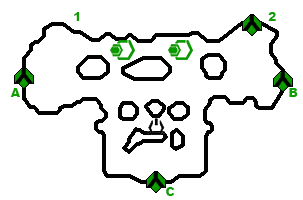
<style>
.page{position:relative;width:303px;height:200px;background:#ffffff}
.page>*{position:absolute;margin:0}
.t1{font:12px "Arial-Black";color:#0d9e01}
</style>
<div class="page">
<p class="t1" style="left:74px;top:12px;width:6px;height:9px">1</p>
<p class="t1" style="left:268px;top:12px;width:8px;height:9px">2</p>
<p class="t1" style="left:10px;top:88px;width:10px;height:9px">A</p>
<p class="t1" style="left:289px;top:88px;width:9px;height:9px">B</p>
<p class="t1" style="left:166px;top:187px;width:9px;height:9px">C</p>
</div>
